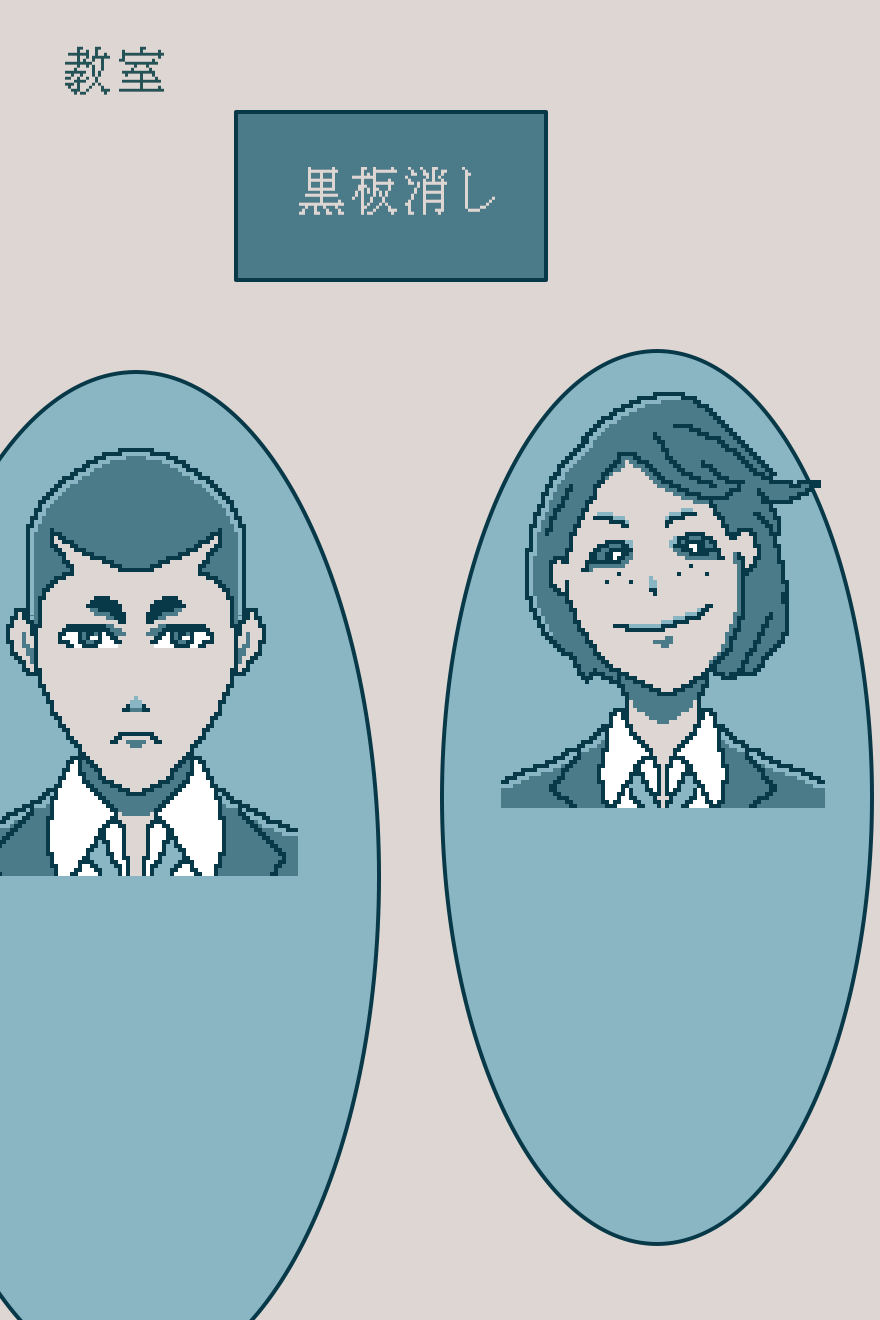
<style>
.page{position:relative;width:880px;height:1320px;background:#ded6d2}
.page>*{position:absolute;margin:0}
.t1{font:48px "KH-Dot-kagurazaka-16";letter-spacing:0.14em;color:#1e4f5e}
.t2{font:48px "KH-Dot-kagurazaka-16";letter-spacing:0.14em;color:#e0d8d1}
</style>
<div class="page">
<p class="t1" style="left:65px;top:46px;width:99px;height:49px">教室</p>
<p class="t2" style="left:299px;top:167px;width:196px;height:48px">黒板消し</p>
</div>
